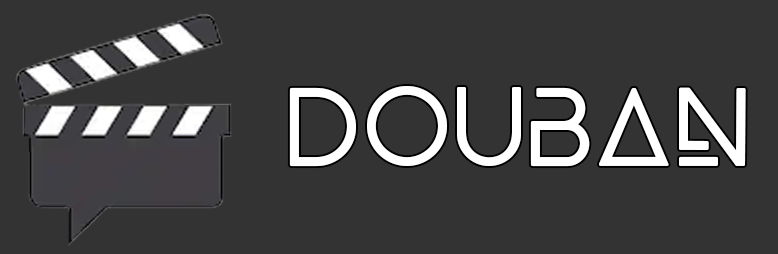
<style>
.page{position:relative;width:778px;height:254px;background:#333333}
.page>*{position:absolute;margin:0}
.t1{font:108.5px "BEYNO";color:#ffffff}
</style>
<div class="page">
<p class="t1" style="left:289px;top:86px;width:457px;height:81px">Douban</p>
</div>
